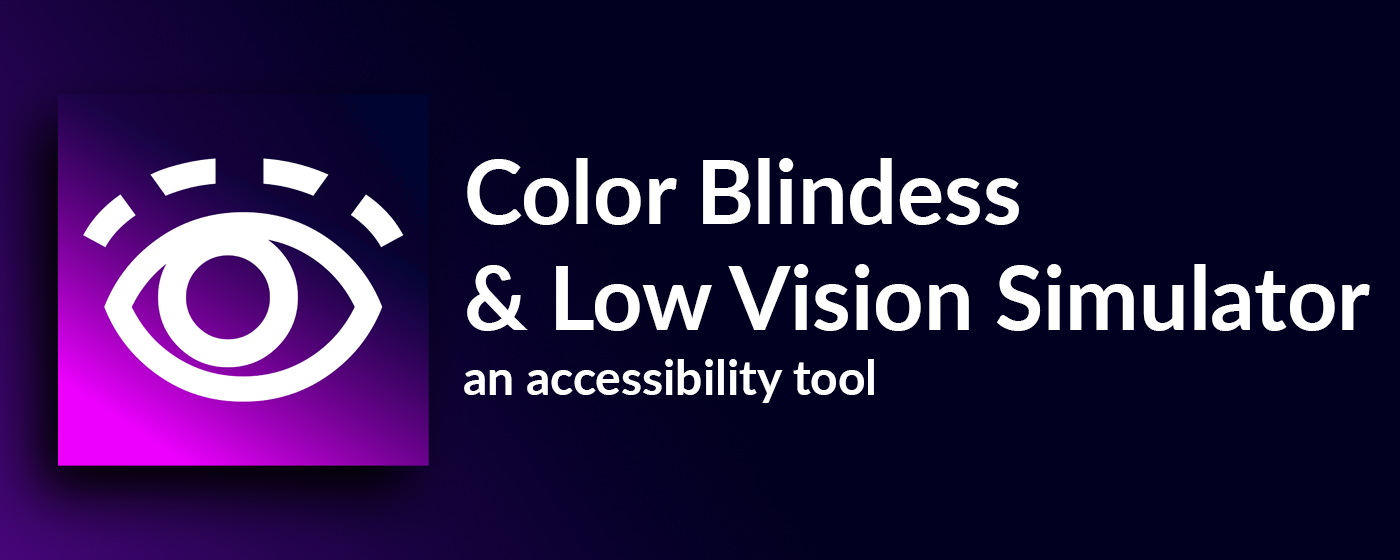
<style>
.page{position:relative;width:1400px;height:560px;background:#020020}
.page>*{position:absolute;margin:0}
.t1{font:88px "Lato-Bold";color:#ffffff}
.t2{font:48px "Lato-Bold";color:#ffffff}
</style>
<div class="page">
<p class="t1" style="left:467px;top:158px;width:903px;height:173px">Color Blindess<br>&amp; Low Vision Simulator</p>
<p class="t2" style="left:464px;top:359px;width:410px;height:44px">an accessibility tool</p>
</div>
